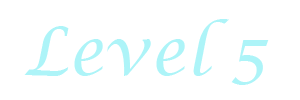
<style>
.page{position:relative;width:300px;height:100px;background:#ffffff}
.page>*{position:absolute;margin:0}
.t1{font:66px "LucidaCalligraphy-Italic";color:#adf4f8}
</style>
<div class="page">
<p class="t1" style="left:24px;top:19px;width:245px;height:66px">Level 5</p>
</div>
